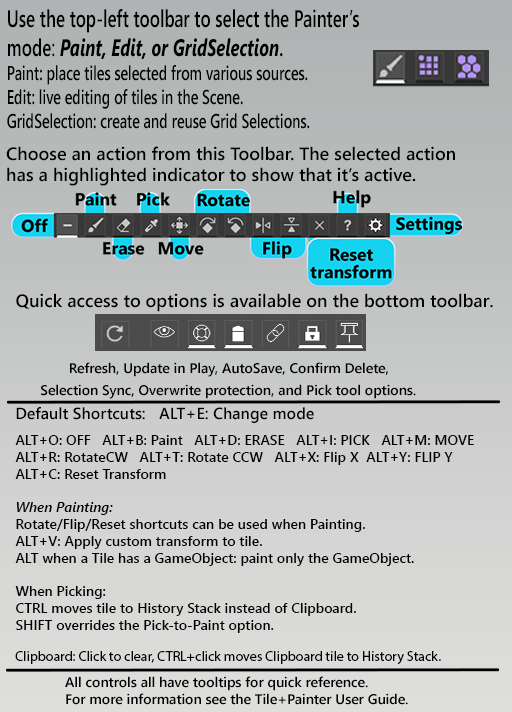
<style>
.page{position:relative;width:512px;height:712px}
.page>*{position:absolute;margin:0}
.t1{font:20px "SegoeUI-Semibold";color:#000000;scale:0.71 1}
.t2{font:24px "SegoeUI-Semibold";color:#000000;scale:0.71 1}
.t3{font:24px "SegoeUI";color:#000000;scale:0.71 1}
.t4{font:24px "SegoeUI-BoldItalic";color:#000000;scale:0.71 1}
.t5{font:18px "SegoeUI-Semibold";color:#000000}
.t6{font:17px "SegoeUI-Semibold";color:#000000}
.t7{font:14px "SegoeUI-Semibold";color:#000000}
.t8{font:16px "SegoeUI-Semibold";color:#000000}
.t9{font:14px "SegoeUI-SemiboldItalic";color:#000000}
.t10{font:14px "MyriadPro-Regular";color:#000000}
</style>
<div class="page">
<p class="t1" style="left:7px;top:9px;width:352px;height:120px"><span class="t2">Use the top-left toolbar to select the Painter’s<br>mode</span><span class="t3">:</span><span class="t4"> Paint, Edit, or GridSelection</span><span class="t2">. <br></span>Paint: place tiles selected from various sources.<br>Edit: live editing of tiles in the Scene.<br>GridSelection: create and reuse Grid Selections.</p>
<p class="t5" style="left:6px;top:146px;width:449px;height:40px">Choose an action from this Toolbar. The selected action<br>has a highlighted indicator to show that it’s active.</p>
<p class="t5" style="left:16px;top:293px;width:477px;height:19px">Quick access to options is available on the bottom toolbar<span class="t6">.</span></p>
<p class="t7" style="left:41px;top:362px;width:375px;height:37px;text-align:center">Refresh, Update in Play, AutoSave, Confirm Delete, <br>Selection Sync, Overwrite protection, and Pick tool options.</p>
<p class="t8" style="left:16px;top:407px;width:298px;height:16px">Default Shortcuts:   ALT+E: Change mode</p>
<p class="t7" style="left:15px;top:435px;width:459px;height:198px">ALT+O: OFF   ALT+B: Paint   ALT+D: ERASE   ALT+I: PICK   ALT+M: MOVE<br>ALT+R: RotateCW   ALT+T: Rotate CCW   ALT+X: Flip X  ALT+Y: FLIP Y<br>ALT+C: Reset Transform<br><br><span class="t9">When Painting:</span> <br>Rotate/Flip/Reset shortcuts can be used when Painting.<br>ALT+V: Apply custom transform to tile.<br>ALT when a Tile has a GameObject: paint only the GameObject.<br><br>When Picking: <br>CTRL moves tile to History Stack instead of Clipboard.<br>SHIFT overrides the Pick-to-Paint option.</p>
<p class="t10" style="left:15px;top:651px;width:426px;height:14px">Clipboard: Click to clear, CTRL+click moves Clipboard tile to History Stack.</p>
<p class="t7" style="left:65px;top:676px;width:343px;height:29px">All controls all have tooltips for quick reference.<br>For more information see the Tile+Painter User Guide.</p>
</div>
